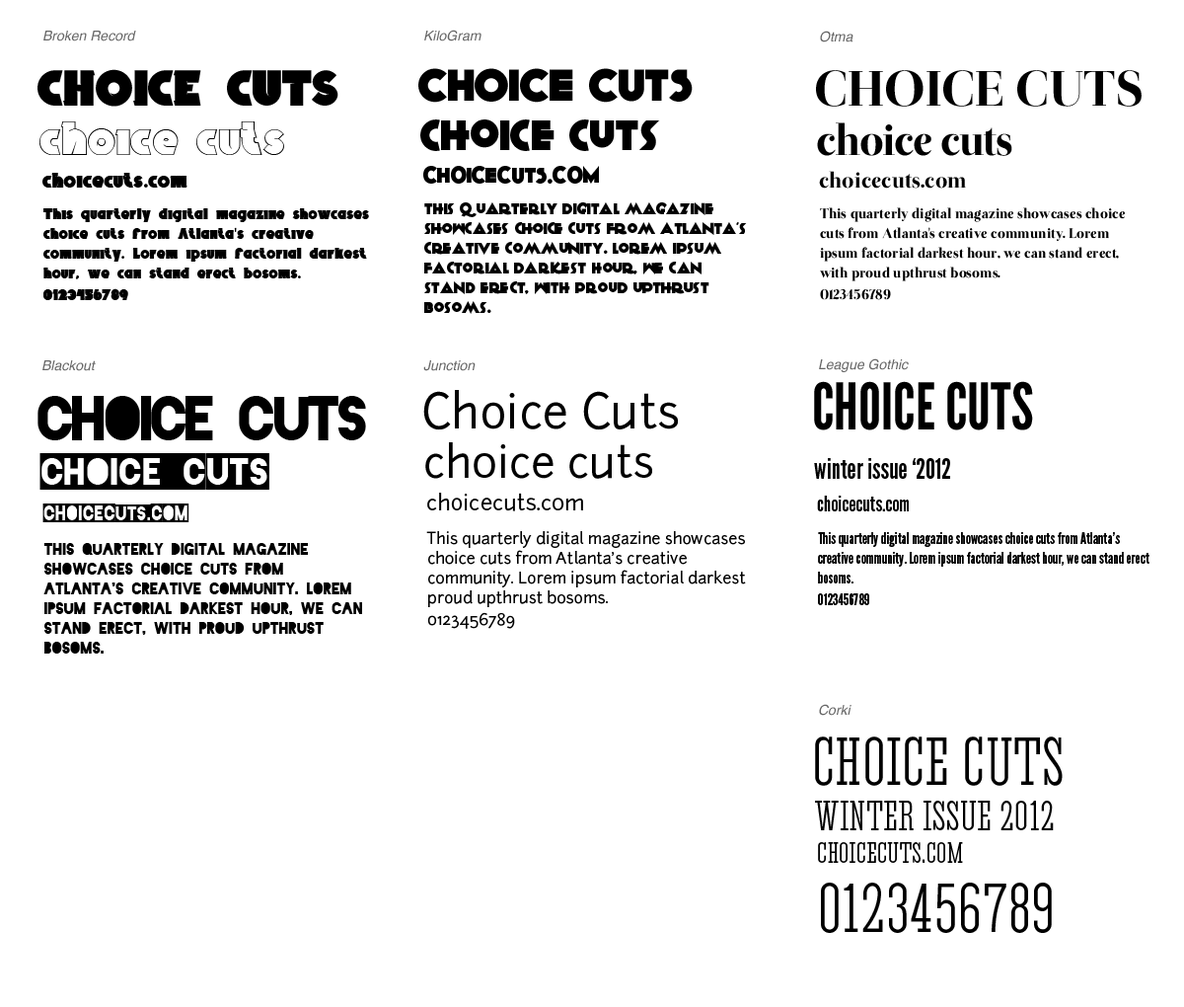
<style>
.page{position:relative;width:1184px;height:1007px;background:#ffffff}
.page>*{position:absolute;margin:0}
.t1{font:13.8px "Helvetica-Oblique";color:#666666}
.t2{font:50.3px "BrokenRecords45";color:#000000;text-transform:uppercase}
.t3{font:45.4px "KiloGram";color:#000000;text-transform:uppercase}
.t4{font:49.4px "Otama-ep";color:#000000;text-transform:uppercase}
.t5{font:47.4px "BrokenRecords33";color:#000000}
.t6{font:43.4px "KiloGram";color:#000000}
.t7{font:43.4px "Otama-ep";letter-spacing:-0.04em;color:#000000}
.t8{font:21.7px "BrokenRecords45";color:#000000}
.t9{font:21.7px "Carton";color:#000000}
.t10{font:21.7px "KiloGram";color:#000000;text-transform:uppercase}
.t11{font:21.7px "Otama-ep";color:#000000}
.t12{font:15.8px/19.7px "BrokenRecords45";color:#000000}
.t13{font:15.8px/19.7px "MyriadPro-Regular";color:#000000}
.t14{font:15.8px/19.7px "Carton";color:#000000}
.t15{font:15.8px/19.7px "KiloGram";color:#000000}
.t16{font:13.8px/19.7px "Otama-ep";color:#000000}
.t17{font:46.4px "Junction";color:#000000}
.t18{font:64.2px "LeagueGothic";color:#000000;text-transform:uppercase}
.t19{font:59.2px "Blackout-Midnight";letter-spacing:-0.05em;color:#000000;text-transform:uppercase}
.t20{font:43.4px "Junction";color:#000000}
.t21{font:43.4px "Blackout-2AM";color:#000000}
.t22{font:27.6px "LeagueGothic";color:#000000}
.t23{font:21.7px "Junction";color:#000000}
.t24{font:21.7px "LeagueGothic";color:#000000}
.t25{font:21.7px "Blackout-2AM";color:#000000}
.t26{font:15.8px/19.7px "Junction";color:#000000}
.t27{font:15.8px/19.7px "LeagueGothic";color:#000000}
.t28{font:15.8px/19.7px "Blackout-Midnight";color:#000000}
.t29{font:63.2px "Corki";color:#000000}
.t30{font:38.5px "Corki";color:#000000}
.t31{font:27.6px "Corki";color:#000000}
.t32{font:64.2px "Corki";color:#000000;text-transform:uppercase}
</style>
<div class="page">
<p class="t1" style="left:424px;top:30px;width:58px;height:11px">KiloGram</p>
<p class="t1" style="left:43px;top:31px;width:93px;height:10px">Broken Record</p>
<p class="t1" style="left:820px;top:31px;width:34px;height:11px">Otma</p>
<p class="t2" style="left:38px;top:69px;width:301px;height:38px">choice cuts</p>
<p class="t3" style="left:418px;top:68px;width:275px;height:35px">choice cuts</p>
<p class="t4" style="left:816px;top:70px;width:326px;height:37px">choice cuts</p>
<p class="t5" style="left:38px;top:121px;width:246px;height:34px">choice cuts</p>
<p class="t6" style="left:420px;top:119px;width:240px;height:32px">choice cuts</p>
<p class="t7" style="left:817px;top:122px;width:196px;height:34px">choice cuts</p>
<p class="t8" style="left:42px;top:173px;width:146px;height:15px">choicecuts<span class="t9">.</span>com</p>
<p class="t10" style="left:423px;top:166px;width:176px;height:18px">choicecuts.com</p>
<p class="t11" style="left:819px;top:171px;width:147px;height:18px">choicecuts.com</p>
<p class="t12" style="left:43px;top:208px;width:326px;height:92px">This quarterly digital magazine showcases choice cuts from Atlanta<span class="t13">'</span>s creative community<span class="t14">.</span> Lorem ipsum factorial darkest hour<span class="t14">,</span> we can stand erect bosoms<span class="t14">.</span><br>0123456789</p>
<p class="t15" style="left:424px;top:202px;width:323px;height:112px">This quarterly digital magazine showcases choice cuts from Atlanta's creative community. Lorem ipsum factorial darkest hour, we can stand erect, with proud upthrust bosoms.<br>0123456789</p>
<p class="t16" style="left:820px;top:207px;width:305px;height:93px">This quarterly digital magazine showcases choice cuts from Atlanta's creative community. Lorem ipsum factorial darkest hour, we can stand erect, with proud upthrust bosoms.<br>0123456789</p>
<p class="t1" style="left:42px;top:360px;width:54px;height:11px">Blackout</p>
<p class="t1" style="left:423px;top:360px;width:53px;height:11px">Junction</p>
<p class="t1" style="left:819px;top:358px;width:90px;height:14px">League Gothic</p>
<p class="t17" style="left:423px;top:390px;width:256px;height:40px">Choice Cuts</p>
<p class="t18" style="left:814px;top:381px;width:219px;height:49px">choice cuts</p>
<p class="t19" style="left:38px;top:396px;width:328px;height:44px">choice cuts</p>
<p class="t20" style="left:425px;top:442px;width:227px;height:37px">choice cuts</p>
<p class="t21" style="left:39px;top:453px;width:230px;height:37px">choice_cuts</p>
<p class="t22" style="left:814px;top:458px;width:137px;height:21px">winter issue ‘2012</p>
<p class="t23" style="left:427px;top:493px;width:156px;height:18px">choicecuts.com</p>
<p class="t24" style="left:817px;top:495px;width:92px;height:16px">choicecuts.com</p>
<p class="t25" style="left:42px;top:503px;width:148px;height:19px">choicecuts.com</p>
<p class="t26" style="left:426px;top:531px;width:320px;height:98px">This quarterly digital magazine showcases choice cuts from Atlanta's creative community. Lorem ipsum factorial darkest proud upthrust bosoms.<br>0123456789</p>
<p class="t27" style="left:818px;top:532px;width:332px;height:73px">This quarterly digital magazine showcases choice cuts from Atlanta's creative community. Lorem ipsum factorial darkest hour, we can stand erect bosoms.<br>0123456789</p>
<p class="t28" style="left:43px;top:543px;width:319px;height:110px">This quarterly digital magazine showcases choice cuts from Atlanta's creative community. Lorem ipsum factorial darkest hour, we can stand erect, with proud upthrust bosoms.<br>0123456789</p>
<p class="t1" style="left:819px;top:704px;width:33px;height:12px">Corki</p>
<p class="t29" style="left:815px;top:736px;width:248px;height:50px">CHOICE CUTS</p>
<p class="t30" style="left:815px;top:800px;width:239px;height:30px">WINTER ISSUE 2012</p>
<p class="t31" style="left:818px;top:842px;width:145px;height:21px">CHOICECUTS.COM</p>
<p class="t32" style="left:821px;top:882px;width:231px;height:51px">0123456789</p>
</div>
